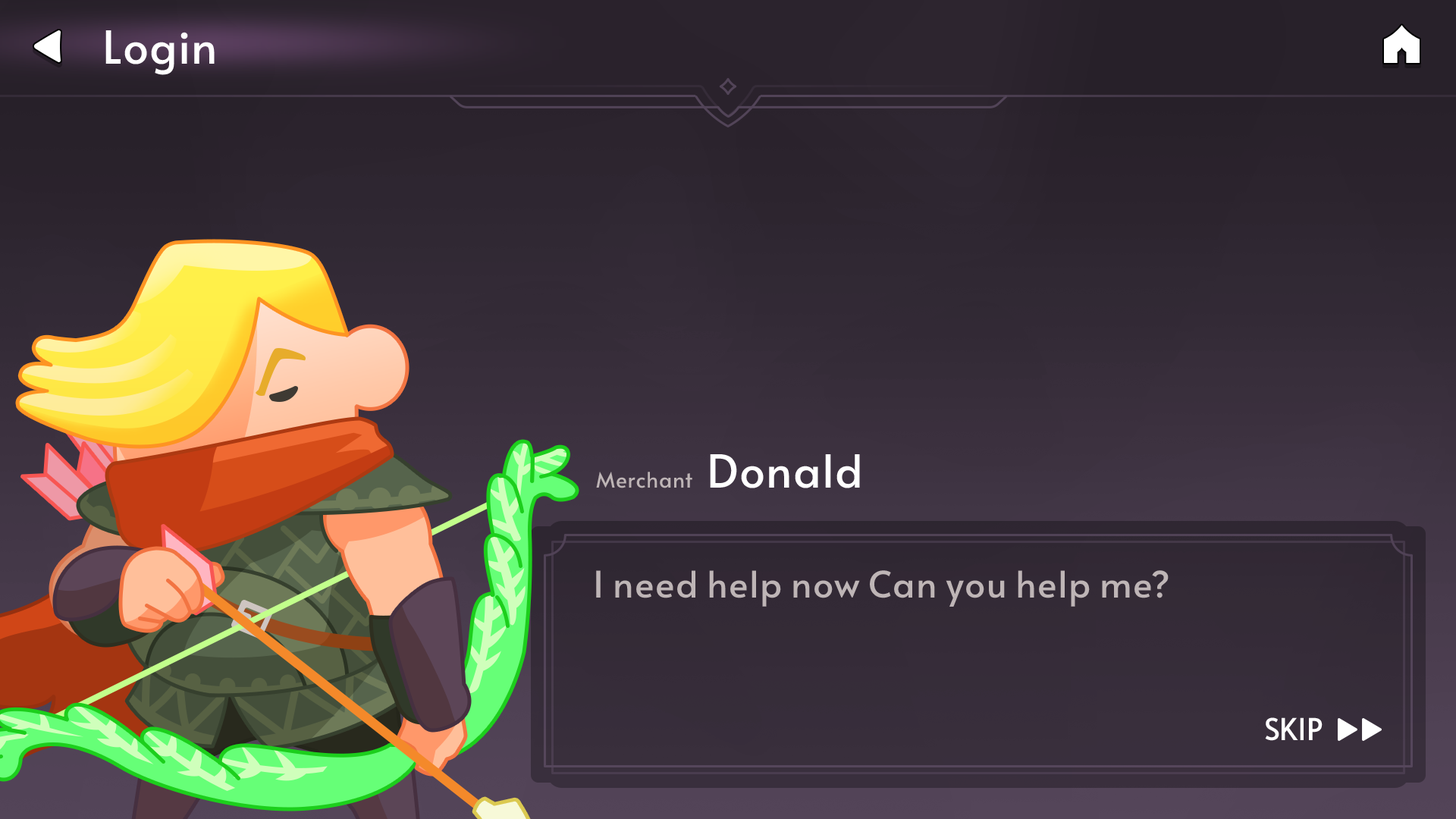
<style>
.page{position:relative;width:1456px;height:819px}
.page>*{position:absolute;margin:0}
.t1{font:45.5px "Alata-Regular";color:#ffffff}
.t2{font:21.2px "Alata-Regular";color:#beb5b6}
.t3{font:36.4px "Alata-Regular";color:#beb5b6}
.t4{font:30.3px "Alata-Regular";color:#ffffff;text-transform:uppercase}
</style>
<div class="page">
<p class="t1" style="left:105px;top:30px;width:110px;height:45px">Login</p>
<p class="t1" style="left:710px;top:454px;width:150px;height:34px">Donald</p>
<p class="t2" style="left:596px;top:472px;width:96px;height:16px">Merchant</p>
<p class="t3" style="left:596px;top:570px;width:573px;height:37px">I need help now Can you help me?</p>
<p class="t4" style="left:1265px;top:717px;width:58px;height:24px">Skip</p>
</div>
